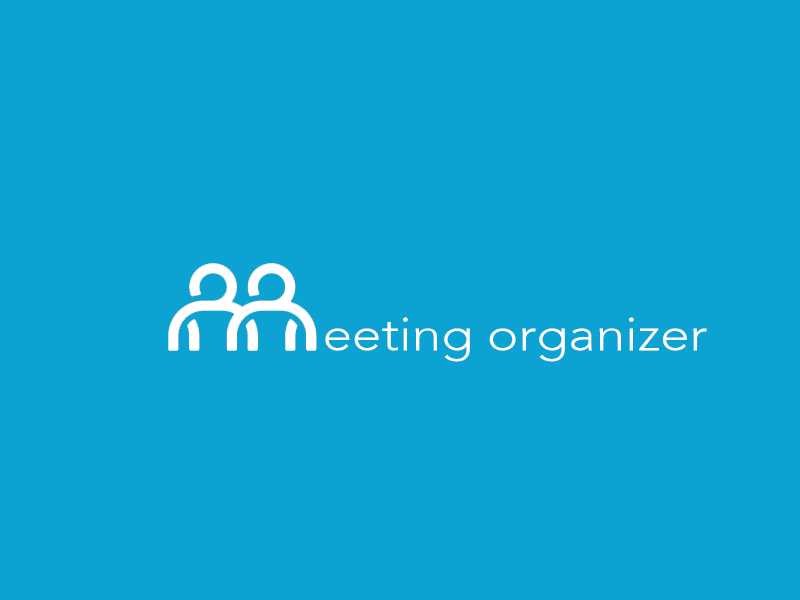
<style>
.page{position:relative;width:800px;height:600px;background:#0ca3d2}
.page>*{position:absolute;margin:0}
.t1{font:48px "Avenir-Light";color:#ffffff;scale:1.1 1}
</style>
<div class="page">
<p class="t1" style="left:325px;top:317px;width:382px;height:45px">eeting organizer</p>
</div>
